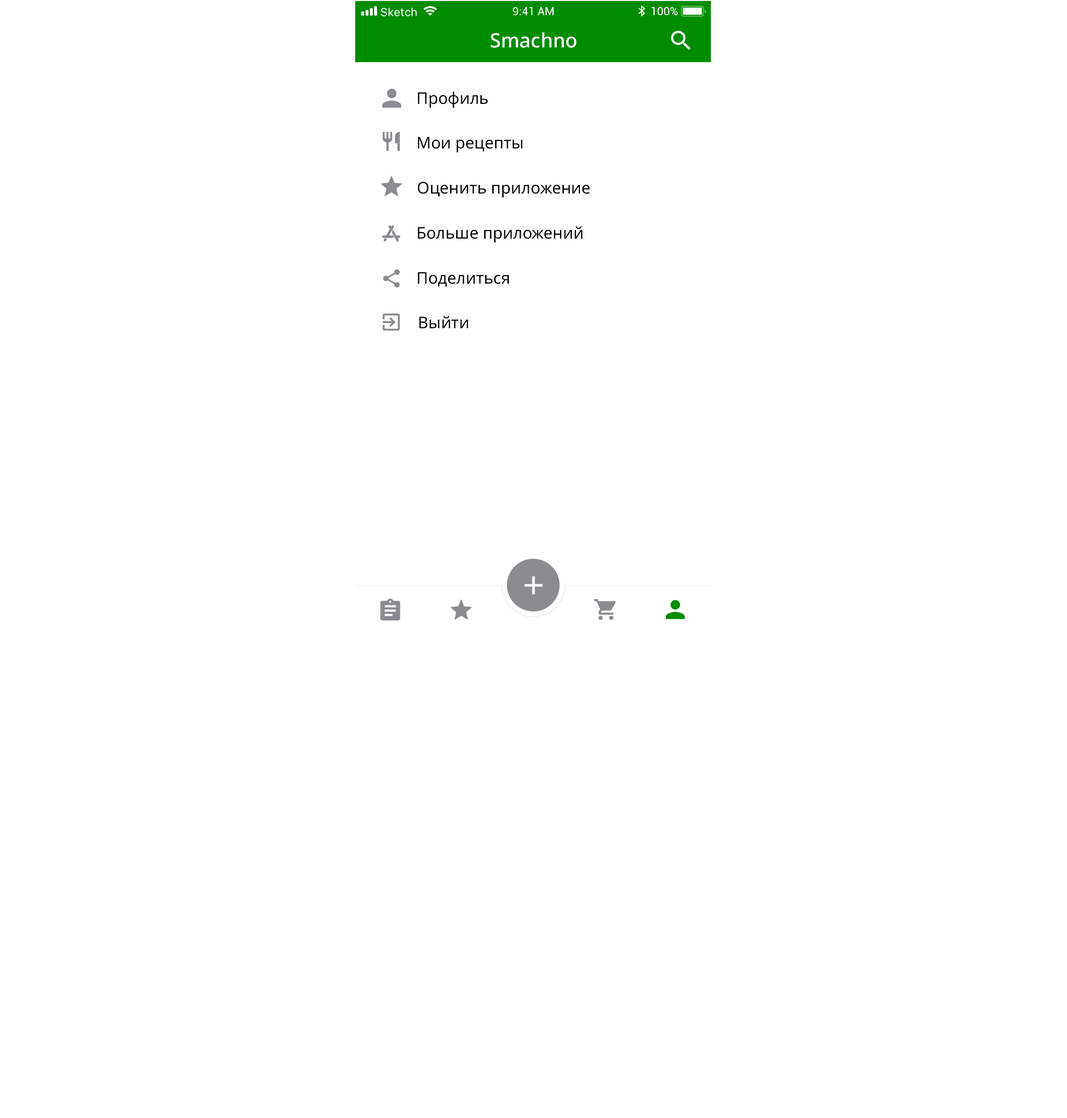
<style>
.page{position:relative;width:1067px;height:1118px;background:#ffffff}
.page>*{position:absolute;margin:0}
.t1{font:19.8px "NotoSans-Medium";color:#ffffff}
.t2{font:16.1px "NotoSans-Regular";color:#000000}
</style>
<div class="page">
<p class="t1" style="left:491px;top:32px;width:86px;height:16px">Smachno</p>
<p class="t2" style="left:418px;top:92px;width:70px;height:16px">Профиль</p>
<p class="t2" style="left:418px;top:137px;width:105px;height:16px">Мои рецепты</p>
<p class="t2" style="left:418px;top:182px;width:172px;height:16px">Оценить приложение</p>
<p class="t2" style="left:418px;top:226px;width:164px;height:17px">Больше приложений</p>
<p class="t2" style="left:418px;top:272px;width:91px;height:15px">Поделиться</p>
<p class="t2" style="left:419px;top:316px;width:49px;height:12px">Выйти</p>
</div>
